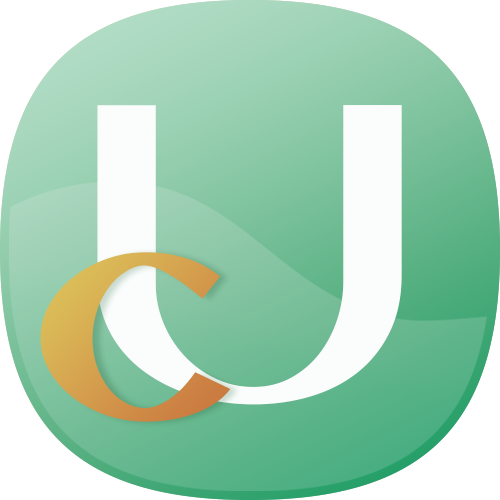
<style>
.page{position:relative;width:500px;height:500px}
.page>*{position:absolute;margin:0}
.t1{font:366.7px "KuBook-Regular";color:#fafdfc}
</style>
<div class="page">
<p class="t1" style="left:97px;top:105px;width:305px;height:300px">U</p>
</div>
